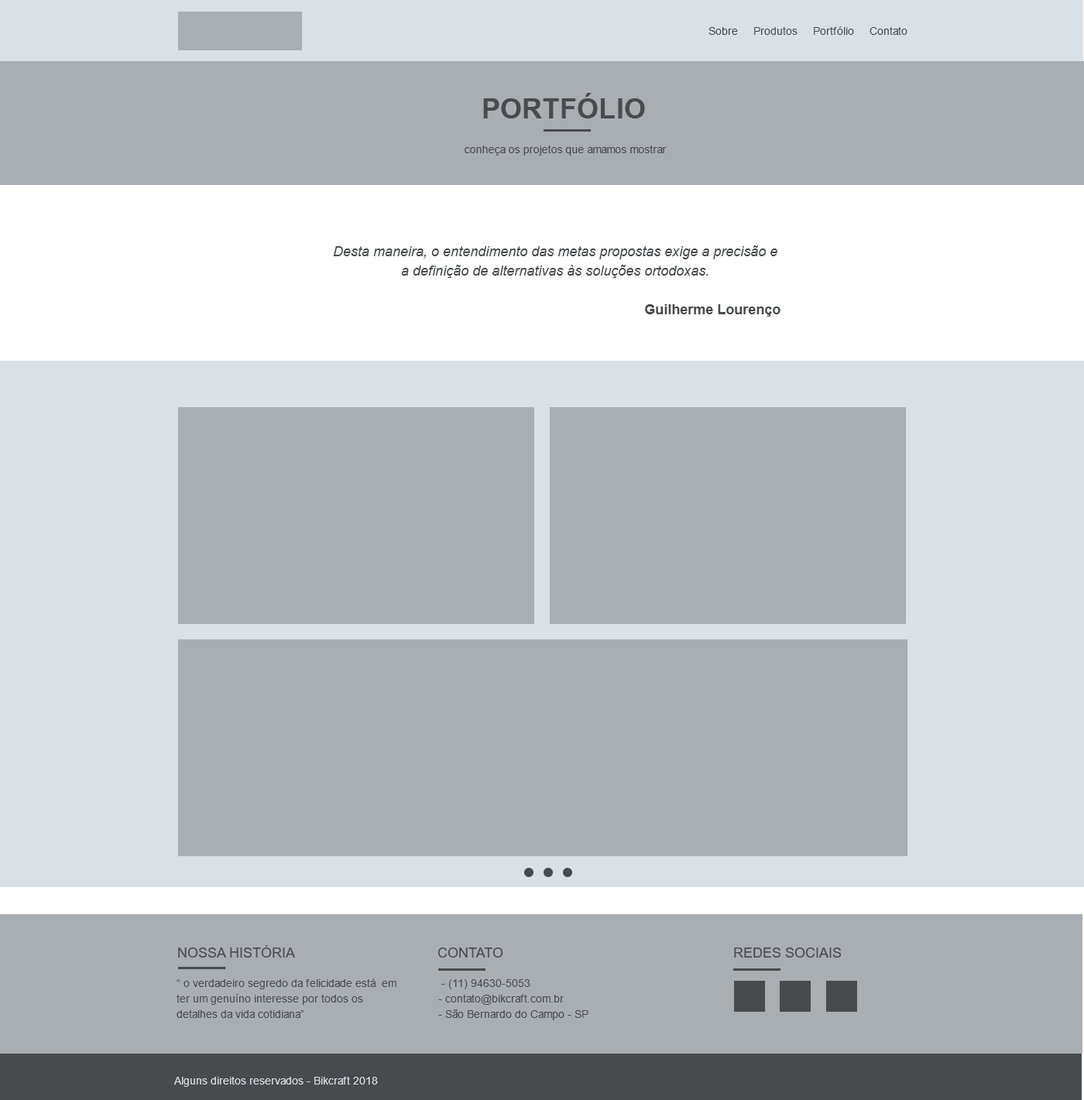
<style>
.page{position:relative;width:1084px;height:1100px;background:#a9aeb3}
.page>*{position:absolute;margin:0}
.t1{font:10.8px "ArialMT";color:#484b4d}
.t2{font:27.9px "Arial-BoldMT";color:#484b4d;text-transform:uppercase}
.t3{font:13.9px/19.4px "Arial-ItalicMT";color:#484b4d}
.t4{font:13.9px/19.4px "Arial-BoldMT";color:#484b4d}
.t5{font:13.9px "ArialMT";color:#484b4d;text-transform:uppercase}
.t6{font:10.8px/15.5px "ArialMT";color:#484b4d}
.t7{font:10.8px "ArialMT";color:#d9e0e6}
.t8{font:10.8px "ArialMT";color:#d9e0e6;text-transform:uppercase}
</style>
<div class="page">
<p class="t1" style="left:708px;top:26px;width:199px;height:9px">Sobre     Produtos     Portfólio     Contato</p>
<p class="t2" style="left:483px;top:93px;width:162px;height:25px">portfólio</p>
<p class="t1" style="left:465px;top:146px;width:202px;height:10px">conheça os projetos que amamos mostrar</p>
<p class="t3" style="left:333px;top:245px;width:447px;height:72px;text-align:center">Desta maneira, o entendimento das metas propostas exige a precisão e a definição de alternativas às soluções ortodoxas.<br><br><span class="t4">Guilherme Lourenço</span></p>
<p class="t5" style="left:178px;top:945px;width:117px;height:13px">Nossa história</p>
<p class="t5" style="left:437px;top:948px;width:66px;height:10px">Contato</p>
<p class="t5" style="left:734px;top:948px;width:107px;height:10px">redes sociais</p>
<p class="t6" style="left:177px;top:979px;width:219px;height:39px">“ o verdadeiro segredo da felicidade está  em <br>ter um genuíno interesse por todos os <br>detalhes da vida cotidiana”</p>
<p class="t6" style="left:438px;top:979px;width:150px;height:41px">- (11) 94630-5053<br>- contato@bikcraft.com.br<br>- São Bernardo do Campo - SP</p>
<p class="t7" style="left:174px;top:1077px;width:204px;height:10px"><span class="t8">A</span>lguns direitos reservados - Bikcraft 2018</p>
</div>
